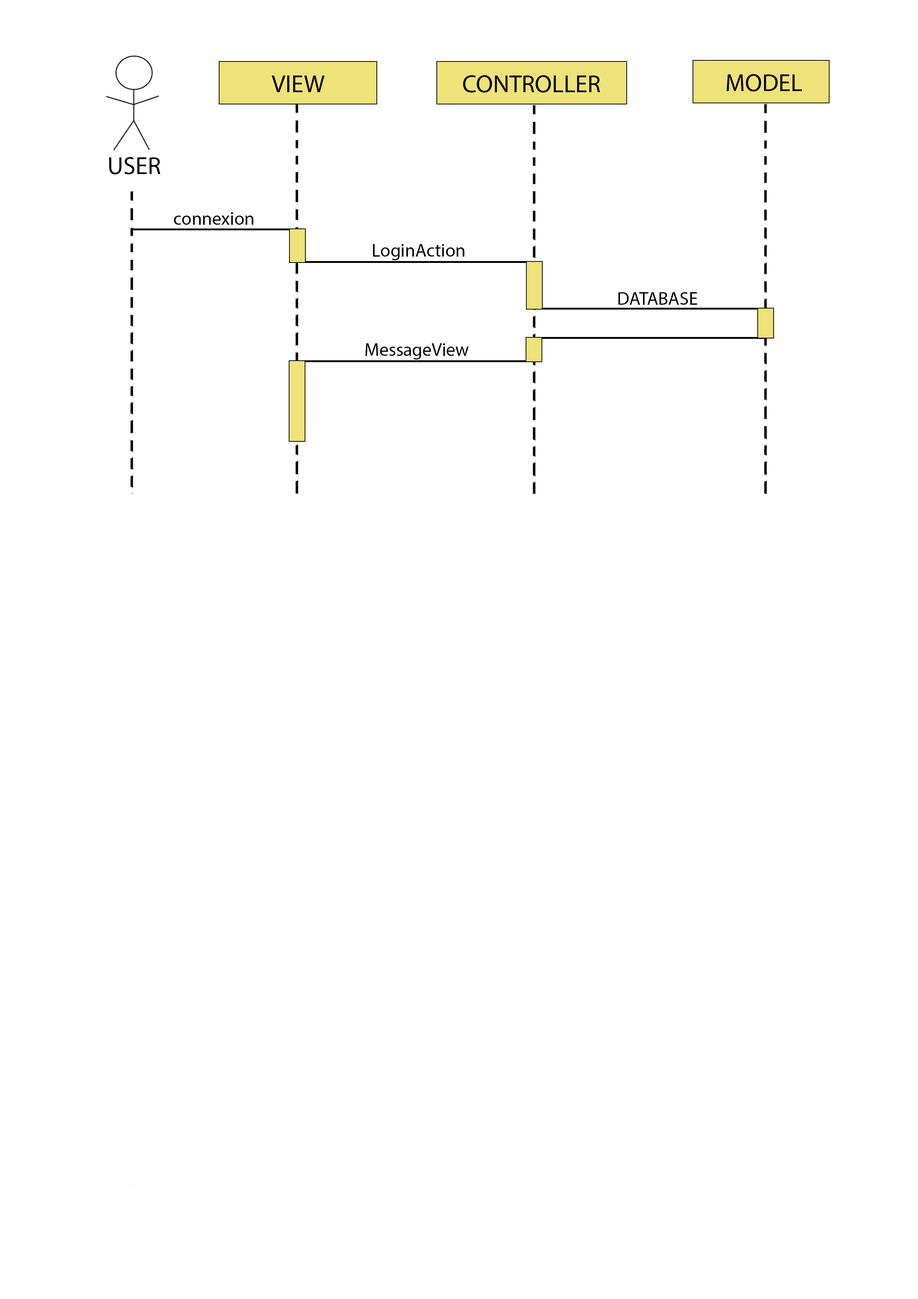
<style>
.page{position:relative;width:918px;height:1299px;background:#ffffff}
.page>*{position:absolute;margin:0}
.t1{font:24.7px "MyriadPro-Regular";color:#000000}
.t2{font:18.5px "MyriadPro-Regular";color:#000000}
</style>
<div class="page">
<p class="t1" style="left:272px;top:76px;width:53px;height:16px">VIEW</p>
<p class="t1" style="left:463px;top:75px;width:137px;height:18px">CONTROLLER</p>
<p class="t1" style="left:727px;top:74px;width:75px;height:17px">MODEL</p>
<p class="t1" style="left:109px;top:157px;width:52px;height:17px">USER</p>
<p class="t2" style="left:174px;top:212px;width:80px;height:13px">connexion</p>
<p class="t2" style="left:373px;top:244px;width:92px;height:16px">LoginAction</p>
<p class="t2" style="left:618px;top:292px;width:79px;height:13px">DATABASE</p>
<p class="t2" style="left:365px;top:343px;width:104px;height:16px">MessageView</p>
</div>
